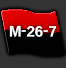
<style>
.page{position:relative;width:66px;height:68px;background:#333333}
.page>*{position:absolute;margin:0}
.t1{font:14px "HYWenHei-85W";color:#ffffff}
</style>
<div class="page">
<p class="t1" style="left:9px;top:25px;width:48px;height:12px">M-26-7</p>
</div>
